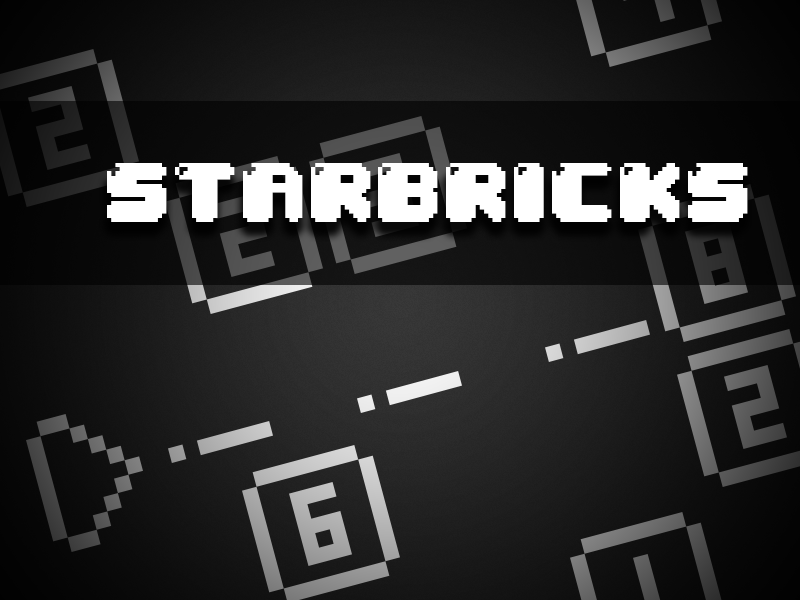
<style>
.page{position:relative;width:800px;height:600px}
.page>*{position:absolute;margin:0}
.t1{font:72px "04b30";color:#ffffff}
</style>
<div class="page">
<p class="t1" style="left:107px;top:163px;width:641px;height:59px">STARBRICKS</p>
</div>
